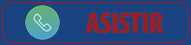
<style>
.page{position:relative;width:191px;height:45px;background:#1a4381}
.page>*{position:absolute;margin:0}
.t1{font:30px "MyriadPro-BlackCond";letter-spacing:-0.025em;color:#9b1f21}
</style>
<div class="page">
<p class="t1" style="left:86px;top:12px;width:77px;height:22px">ASISTIR</p>
</div>
